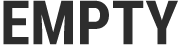
<style>
.page{position:relative;width:181px;height:46px;background:#ffffff}
.page>*{position:absolute;margin:0}
.t1{font:61.3px "RobotoCondensed-Bold";color:#2d2d2d}
</style>
<div class="page">
<p class="t1" style="left:3px;top:0px;width:175px;height:45px">EMPTY</p>
</div>
